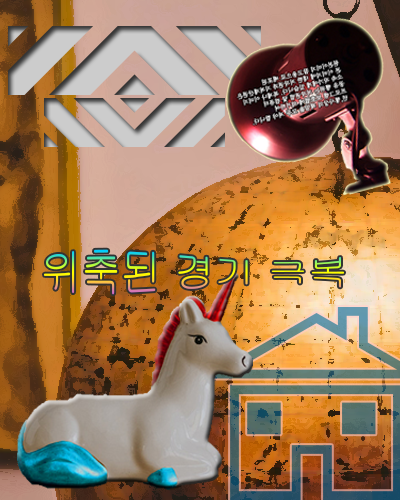
<style>
.page{position:relative;width:400px;height:500px}
.page>*{position:absolute;margin:0}
.t1{font:40.1px "Gulim"}
</style>
<div class="page">
<p class="t1" style="left:44px;top:249px;width:300px;height:46px">위축된 경기 극복</p>
</div>
